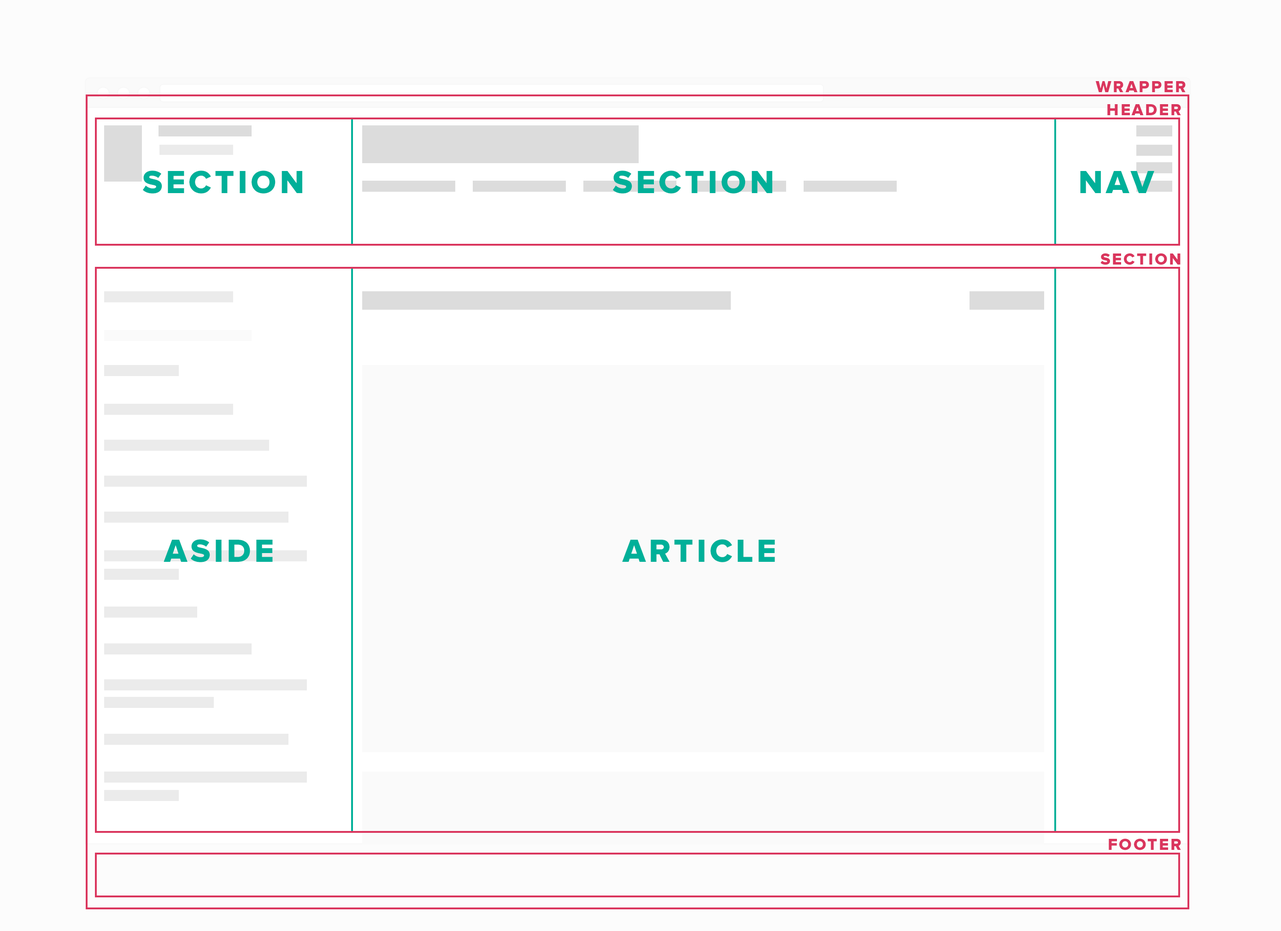
<style>
.page{position:relative;width:1281px;height:931px;background:#ffffff}
.page>*{position:absolute;margin:0}
.t1{font:16.6px "ProximaNova-Extrabld";letter-spacing:0.1em;color:#da355d}
.t2{font:33.2px "ProximaNova-Extrabld";letter-spacing:0.1em;color:#00b099}
</style>
<div class="page">
<p class="t1" style="left:1095px;top:81px;width:91px;height:11px">WRAPPER</p>
<p class="t1" style="left:1107px;top:104px;width:74px;height:11px">HEADER</p>
<p class="t2" style="left:143px;top:170px;width:159px;height:24px">SECTION</p>
<p class="t2" style="left:613px;top:170px;width:159px;height:24px">SECTION</p>
<p class="t2" style="left:1080px;top:171px;width:74px;height:22px">NAV</p>
<p class="t1" style="left:1100px;top:253px;width:81px;height:12px">SECTION</p>
<p class="t2" style="left:164px;top:539px;width:109px;height:23px">ASIDE</p>
<p class="t2" style="left:622px;top:539px;width:153px;height:23px">ARTICLE</p>
<p class="t1" style="left:1109px;top:838px;width:72px;height:12px">FOOTER</p>
</div>
